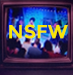
<style>
.page{position:relative;width:73px;height:75px}
.page>*{position:absolute;margin:0}
.t1{font:18.8px "Montserrat-Regular";color:#f9e506;font-weight:bold}
</style>
<div class="page">
<p class="t1" style="left:9px;top:24px;width:59px;height:15px">NSFW</p>
</div>
